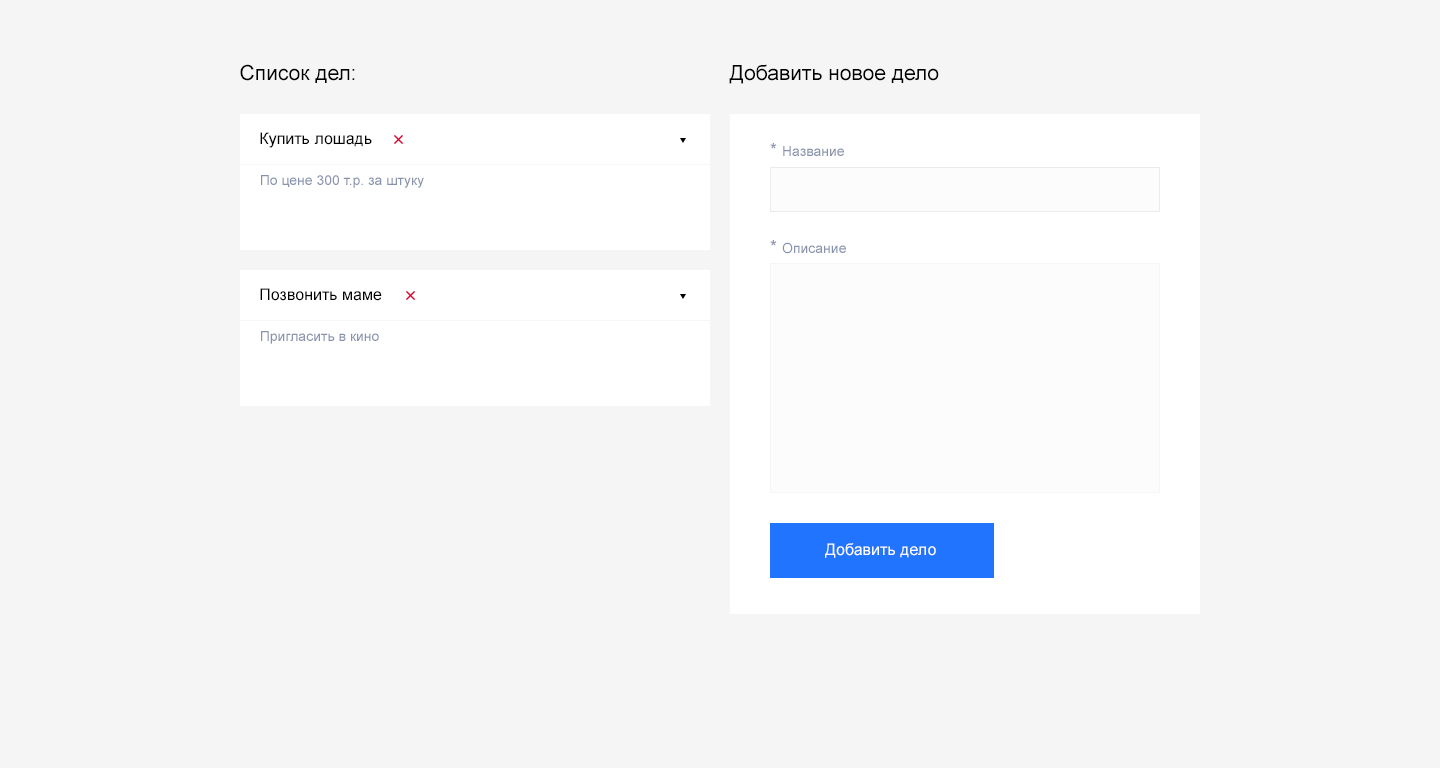
<style>
.page{position:relative;width:1440px;height:768px;background:#f5f5f5}
.page>*{position:absolute;margin:0}
.t1{font:21px "ArialMT";color:#000000}
.t2{font:16px "ArialMT";color:#000000}
.t3{font:14px "ArialMT";color:#8993ad}
.t4{font:18px "ArialMT";color:#8993ad}
.t5{font:16px "ArialMT";color:#ffffff}
</style>
<div class="page">
<p class="t1" style="left:240px;top:64px;width:115px;height:19px">Список дел:</p>
<p class="t1" style="left:729px;top:64px;width:210px;height:20px">Добавить новое дело</p>
<p class="t2" style="left:260px;top:132px;width:112px;height:16px">Купить лошадь</p>
<p class="t3" style="left:770px;top:143px;width:74px;height:13px"><span class="t4">* </span>Название</p>
<p class="t3" style="left:261px;top:175px;width:163px;height:13px">По цене 300 т.р. за штуку</p>
<p class="t3" style="left:770px;top:240px;width:76px;height:14px"><span class="t4">* </span>Описание</p>
<p class="t2" style="left:260px;top:288px;width:122px;height:13px">Позвонить маме</p>
<p class="t3" style="left:261px;top:331px;width:118px;height:13px">Пригласить в кино</p>
<p class="t5" style="left:825px;top:543px;width:111px;height:15px">Добавить дело</p>
</div>
